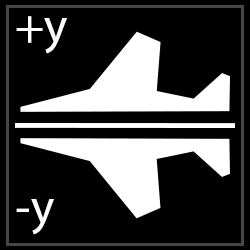
<style>
.page{position:relative;width:250px;height:250px;background:#000000}
.page>*{position:absolute;margin:0}
.t1{font:50px "MyriadPro-Regular";color:#ffffff}
</style>
<div class="page">
<p class="t1" style="left:16px;top:16px;width:51px;height:38px">+y</p>
<p class="t1" style="left:16px;top:199px;width:38px;height:36px">-y</p>
</div>
